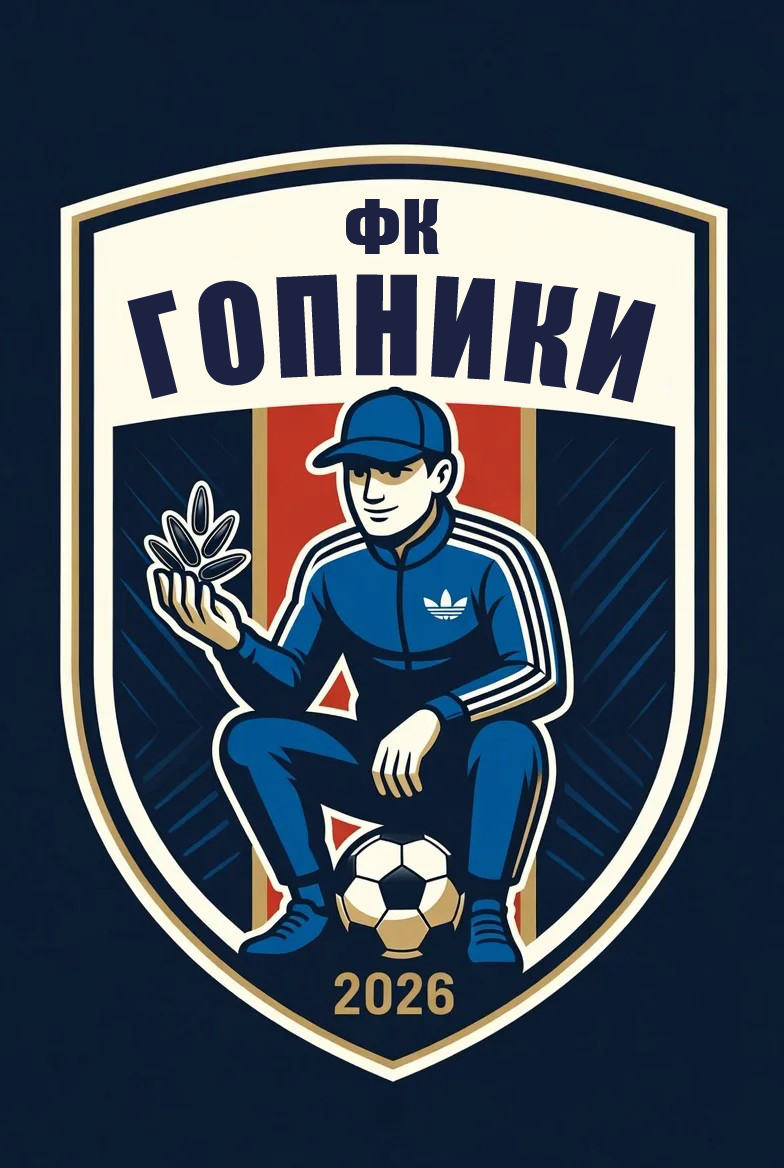
<style>
.page{position:relative;width:784px;height:1168px}
.page>*{position:absolute;margin:0}
.t1{font:69px "Impact";letter-spacing:0.035em;color:#1d2242}
.t2{font:127px "Impact";letter-spacing:0.035em;color:#1d2242}
</style>
<div class="page">
<p class="t1" style="left:346px;top:199px;width:93px;height:55px">ФК</p>
<p class="t2" style="left:127px;top:274px;width:529px;height:129px">ГОПНИКИ</p>
</div>
